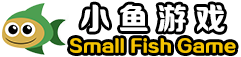
<style>
.page{position:relative;width:241px;height:57px;background:#ffffff}
.page>*{position:absolute;margin:0}
.t1{font:30px "FZRUIZYS_DA--GB1-0";letter-spacing:0.28em;color:#ffffff}
.t2{font:18px "FZRUIZYS_DA--GB1-0";color:#f5c400}
</style>
<div class="page">
<p class="t1" style="left:81px;top:4px;width:144px;height:28px">小鱼游戏</p>
<p class="t2" style="left:70px;top:38px;width:166px;height:15px">Small Fish Game</p>
</div>
